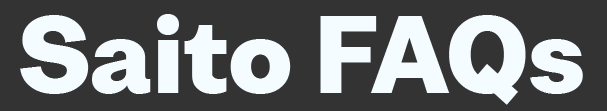
<style>
.page{position:relative;width:607px;height:111px;background:#333333}
.page>*{position:absolute;margin:0}
.t1{font:100px "BwNistaGrotesk-Black";color:#f5fcff}
</style>
<div class="page">
<p class="t1" style="left:20px;top:14px;width:563px;height:91px">Saito FAQs</p>
</div>
